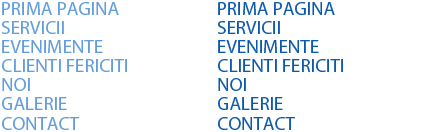
<style>
.page{position:relative;width:432px;height:132px;background:#ffffff}
.page>*{position:absolute;margin:0}
.t1{font:19px "MyriadPro-Regular";color:#639edb}
.t2{font:19px "MyriadPro-Regular";color:#0d5aaa}
</style>
<div class="page">
<p class="t1" style="left:2px;top:2px;width:117px;height:13px">PRIMA PAGINA</p>
<p class="t2" style="left:218px;top:2px;width:117px;height:13px">PRIMA PAGINA</p>
<p class="t1" style="left:1px;top:21px;width:63px;height:13px">SERVICII</p>
<p class="t2" style="left:217px;top:21px;width:63px;height:13px">SERVICII</p>
<p class="t1" style="left:2px;top:40px;width:101px;height:13px">EVENIMENTE</p>
<p class="t2" style="left:218px;top:40px;width:101px;height:13px">EVENIMENTE</p>
<p class="t1" style="left:2px;top:59px;width:125px;height:13px">CLIENTI FERICITI</p>
<p class="t2" style="left:218px;top:59px;width:125px;height:13px">CLIENTI FERICITI</p>
<p class="t1" style="left:2px;top:78px;width:28px;height:13px">NOI</p>
<p class="t2" style="left:218px;top:78px;width:28px;height:13px">NOI</p>
<p class="t1" style="left:2px;top:97px;width:65px;height:13px">GALERIE</p>
<p class="t2" style="left:218px;top:97px;width:65px;height:13px">GALERIE</p>
<p class="t1" style="left:2px;top:117px;width:77px;height:13px">CONTACT</p>
<p class="t2" style="left:218px;top:117px;width:77px;height:13px">CONTACT</p>
</div>
